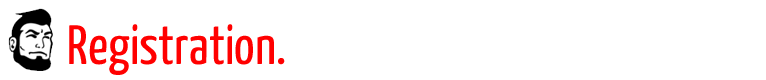
<style>
.page{position:relative;width:766px;height:80px;background:#ffffff}
.page>*{position:absolute;margin:0}
.t1{font:55.3px "YanoneKaffeesatz-Regular";color:#ff0000}
</style>
<div class="page">
<p class="t1" style="left:69px;top:24px;width:216px;height:51px">Registration.</p>
</div>
